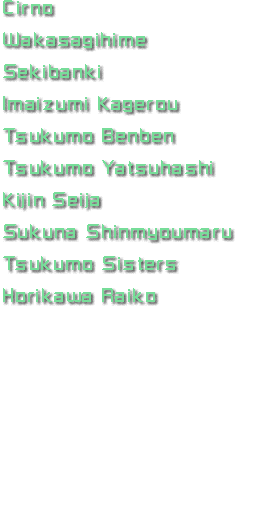
<style>
.page{position:relative;width:256px;height:512px;background:#ffffff}
.page>*{position:absolute;margin:0}
.t1{font:16px/32px "RussellSquare";letter-spacing:0.1em;color:#77dd99}
</style>
<div class="page">
<p class="t1" style="left:3px;top:0px;width:228px;height:302px">Cirno<br>Wakasagihime<br>Sekibanki<br>Imaizumi Kagerou<br>Tsukumo Benben<br>Tsukumo Yatsuhashi<br>Kijin Seija<br>Sukuna Shinmyoumaru<br>Tsukumo Sisters<br>Horikawa Raiko</p>
</div>
